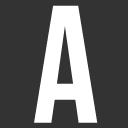
<style>
.page{position:relative;width:128px;height:128px;background:#333333}
.page>*{position:absolute;margin:0}
.t1{font:166.7px "BebasNeue-Regular";letter-spacing:0.06em;color:#ffffff}
</style>
<div class="page">
<p class="t1" style="left:34px;top:5px;width:64px;height:118px">A</p>
</div>
